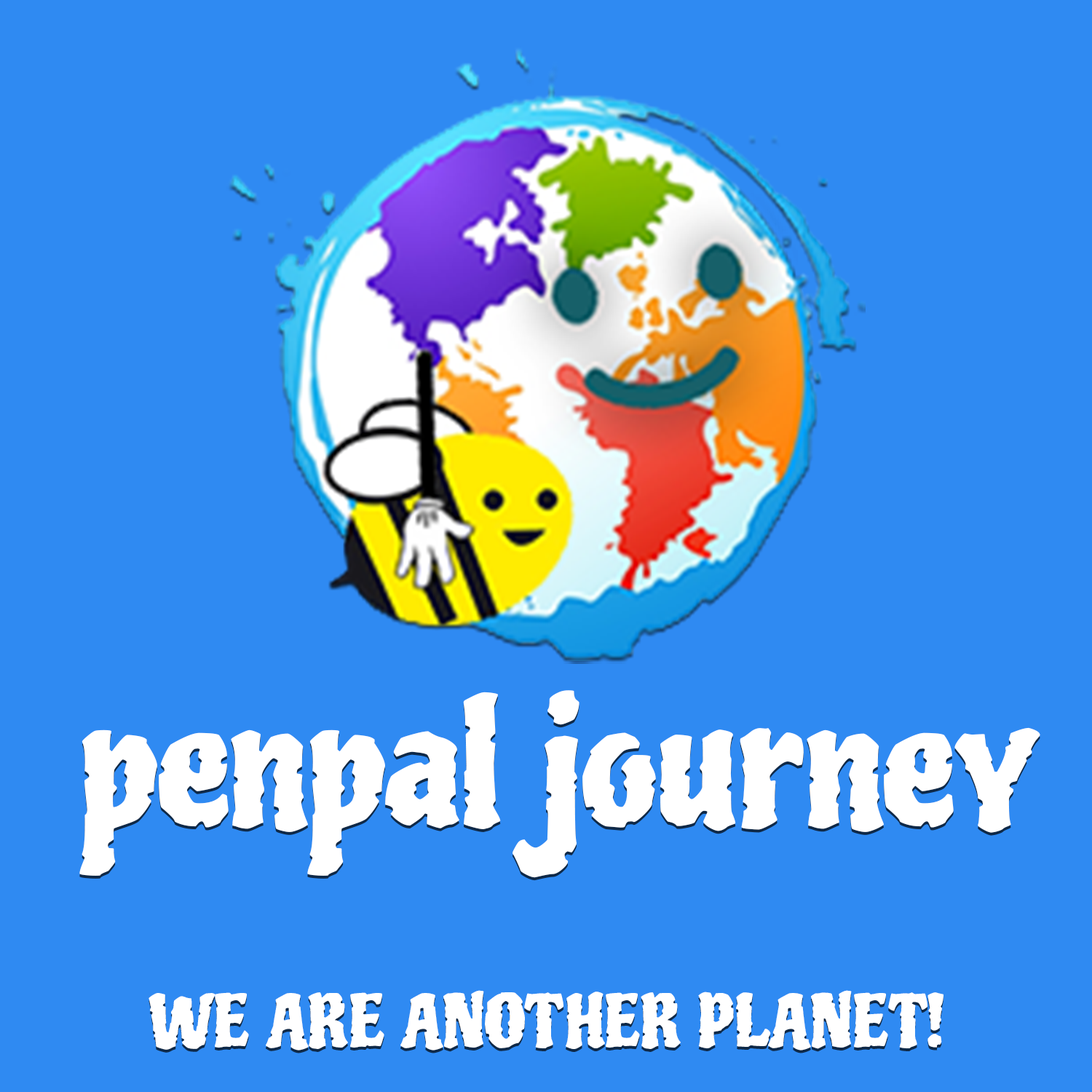
<style>
.page{position:relative;width:1092px;height:1092px;background:#2f8af2}
.page>*{position:absolute;margin:0}
.t1{font:166.7px "Piedra-Regular";color:#ffffff}
.t2{font:70.3px "Piedra-Regular";color:#ffffff}
</style>
<div class="page">
<p class="t1" style="left:79px;top:690px;width:961px;height:188px">penpal journey</p>
<p class="t2" style="left:149px;top:990px;width:794px;height:60px">WE ARE ANOTHER PLANET!</p>
</div>
